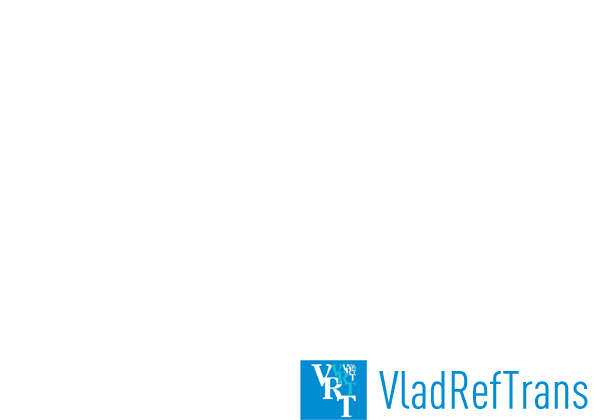
<style>
.page{position:relative;width:600px;height:420px;background:#ffffff}
.page>*{position:absolute;margin:0}
.t1{font:53px "DINPro-CondensedRegular";color:#008dd2}
</style>
<div class="page">
<p class="t1" style="left:379px;top:371px;width:209px;height:39px">VladRefTrans</p>
</div>
